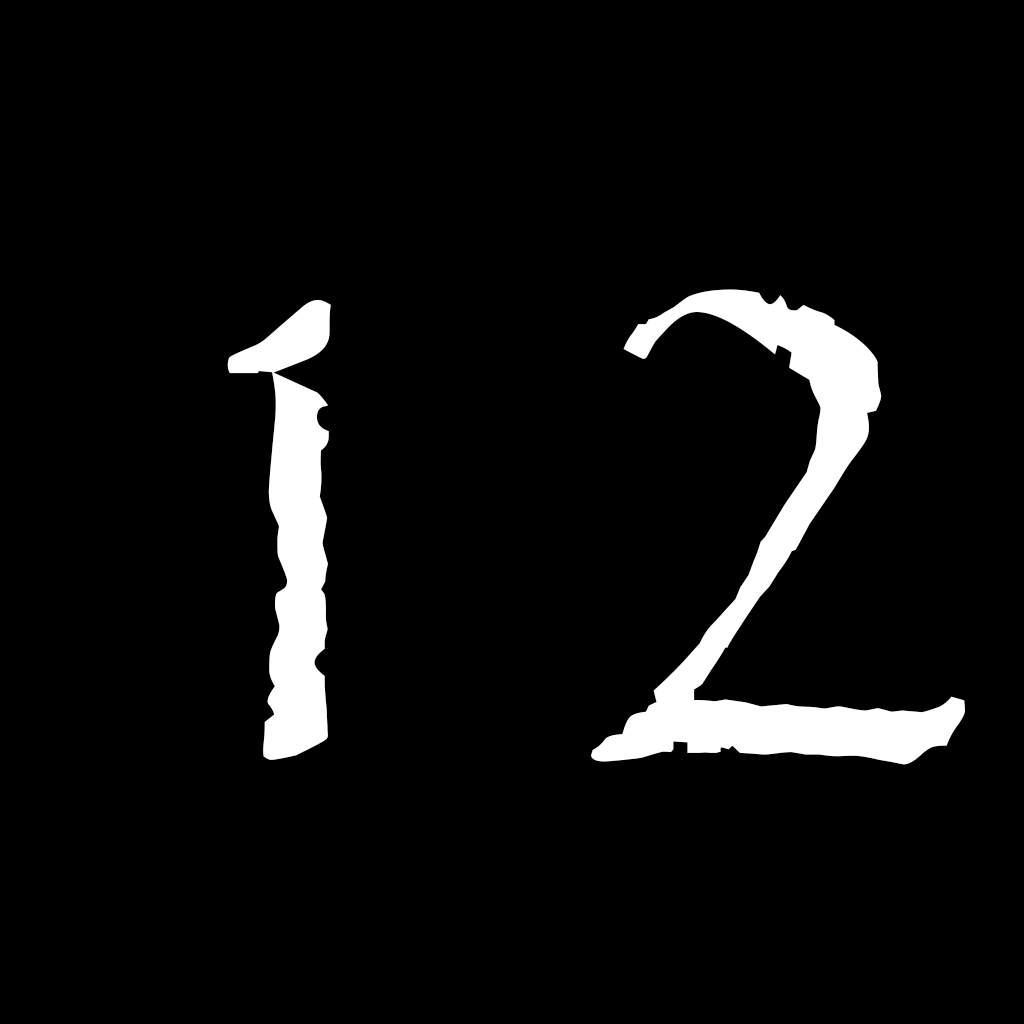
<style>
.page{position:relative;width:1024px;height:1024px;background:#000000}
.page>*{position:absolute;margin:0}
.t1{font:833.3px "Papyrus-Regular";color:#ffffff}
</style>
<div class="page">
<p class="t1" style="left:227px;top:289px;width:738px;height:476px">12</p>
</div>
